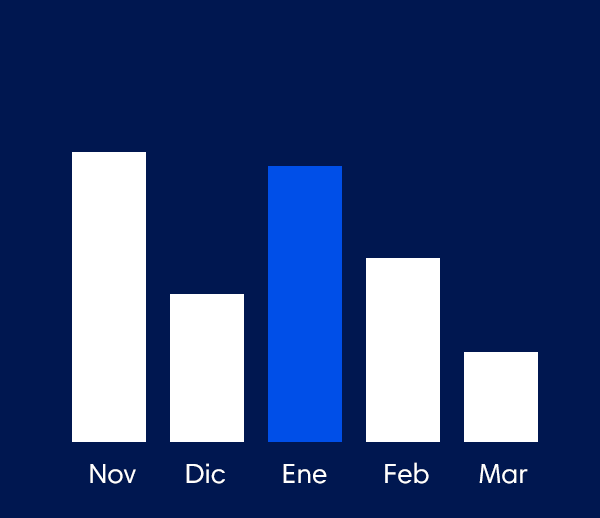
<style>
.page{position:relative;width:600px;height:518px;background:#001750}
.page>*{position:absolute;margin:0}
.t1{font:28px "HarmoniaSansW01-Regular";color:#ffffff}
</style>
<div class="page">
<p class="t1" style="left:90px;top:462px;width:438px;height:22px">Nov       Dic        Ene        Feb       Mar</p>
</div>
